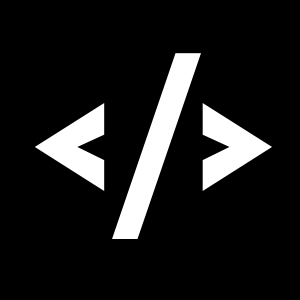
<style>
.page{position:relative;width:300px;height:300px;background:#000000}
.page>*{position:absolute;margin:0}
.t1{font:200px "Bahnschrift-Bold";color:#ffffff}
</style>
<div class="page">
<p class="t1" style="left:34px;top:53px;width:238px;height:186px">&lt;/&gt;</p>
</div>
